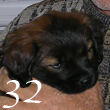
<style>
.page{position:relative;width:110px;height:110px}
.page>*{position:absolute;margin:0}
.t1{font:41.7px "Apple-Chancery";color:#ffffff}
</style>
<div class="page">
<p class="t1" style="left:2px;top:80px;width:40px;height:28px">32</p>
</div>
